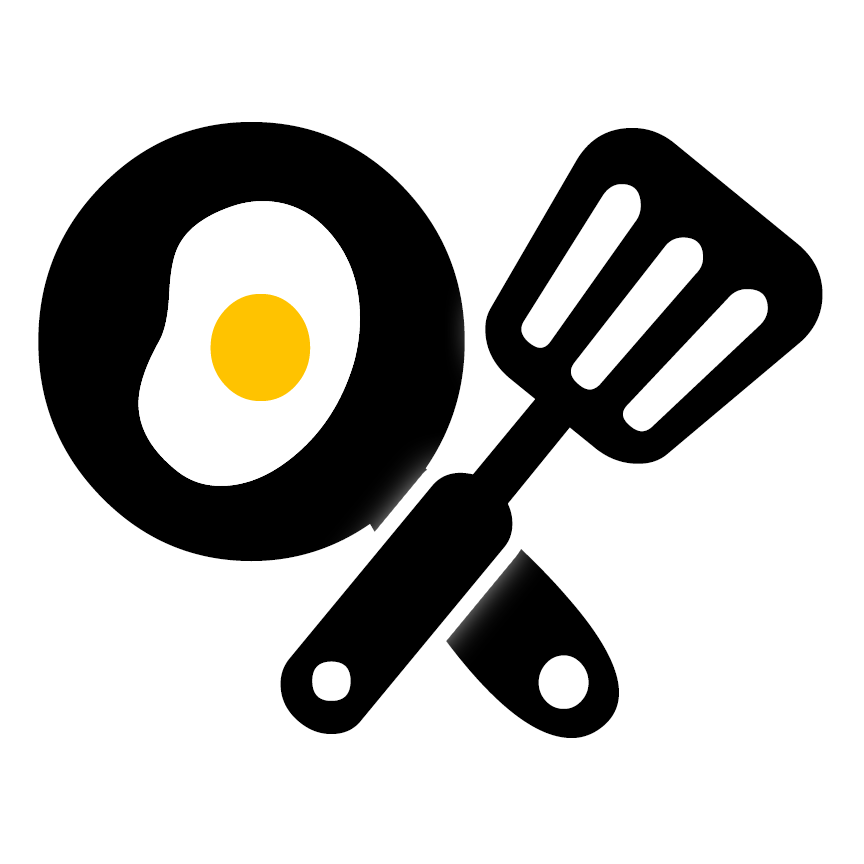
<style>
.page{position:relative;width:864px;height:864px;background:#ffffff}
.page>*{position:absolute;margin:0}
.t1{font:769.6px "Efon";color:#000000}
</style>
<div class="page">
<p class="t1" style="left:38px;top:122px;width:581px;height:616px;rotate:180deg">b</p>
<p class="t1" style="left:280px;top:128px;width:543px;height:606px;rotate:180deg">c</p>
</div>
